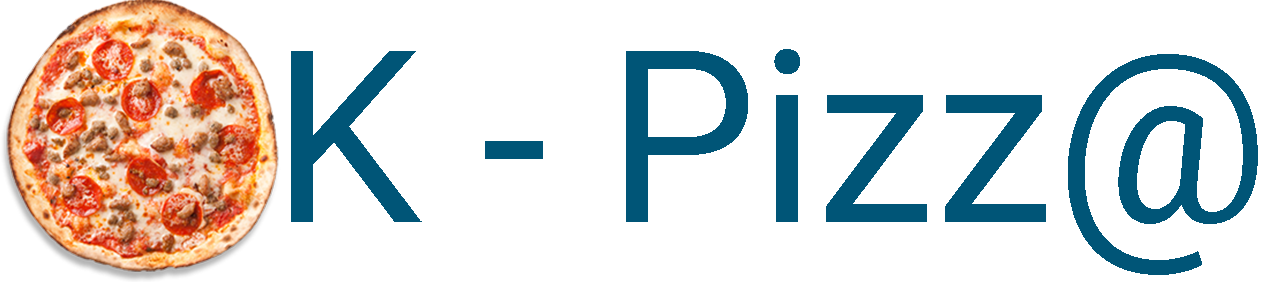
<style>
.page{position:relative;width:1266px;height:282px;background:#ffffff}
.page>*{position:absolute;margin:0}
.t1{font:240px "Roboto-Regular";color:#005577}
</style>
<div class="page">
<p class="t1" style="left:291px;top:49px;width:967px;height:226px">K - Pizz@</p>
</div>
